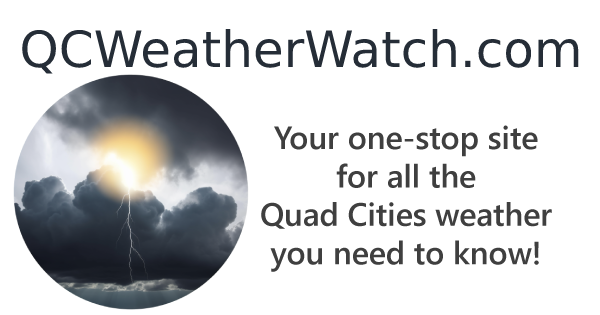
<style>
.page{position:relative;width:600px;height:315px;background:#ffffff}
.page>*{position:absolute;margin:0}
.t1{font:50px "LucidaSans-Demi";color:#252d37}
.t2{font:32px "SegoeUI-Semibold";color:#3f3f3f}
</style>
<div class="page">
<p class="t1" style="left:22px;top:29px;width:557px;height:45px">QCWeatherWatch.com</p>
<p class="t2" style="left:261px;top:125px;width:291px;height:147px;text-align:center">Your one-stop site<br>for all the<br>Quad Cities weather<br>you need to know!</p>
</div>
